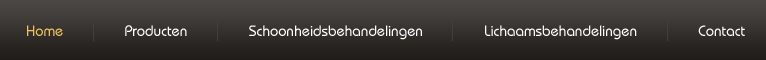
<style>
.page{position:relative;width:766px;height:60px}
.page>*{position:absolute;margin:0}
.t1{font:15px "BauhausITCbyBT-Medium";color:#ffffff}
.t2{font:15px "BauhausITCbyBT-Medium";color:#efc360}
</style>
<div class="page">
<p class="t1" style="left:27px;top:25px;width:718px;height:15px"><span class="t2"> Home               </span>Producten               Schoonheidsbehandelingen               Lichaamsbehandelingen               Contact</p>
</div>
